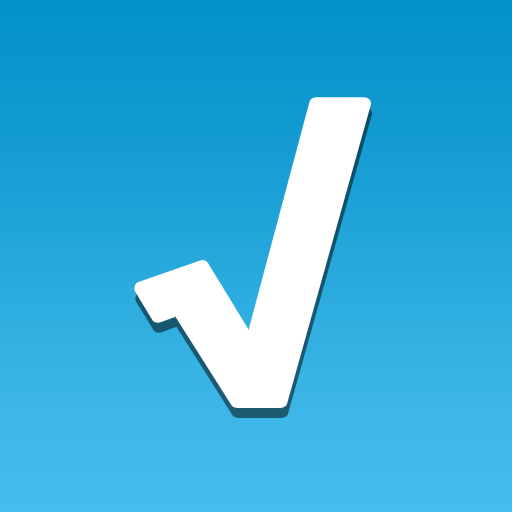
<style>
.page{position:relative;width:512px;height:512px}
.page>*{position:absolute;margin:0}
.t1{font:298.7px "HelveticaNeue-Bold";color:#ffffff;scale:1.31 1}
</style>
<div class="page">
<p class="t1" style="left:140px;top:103px;width:226px;height:299px">√</p>
<p class="t1" style="left:141px;top:113px;width:226px;height:299px">√</p>
</div>
